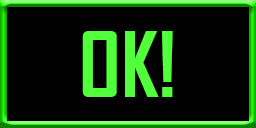
<style>
.page{position:relative;width:256px;height:128px;background:#000000}
.page>*{position:absolute;margin:0}
.t1{font:87px "AgencyFB-Bold";color:#51ff3a}
</style>
<div class="page">
<p class="t1" style="left:82px;top:31px;width:91px;height:66px">OK!</p>
</div>
